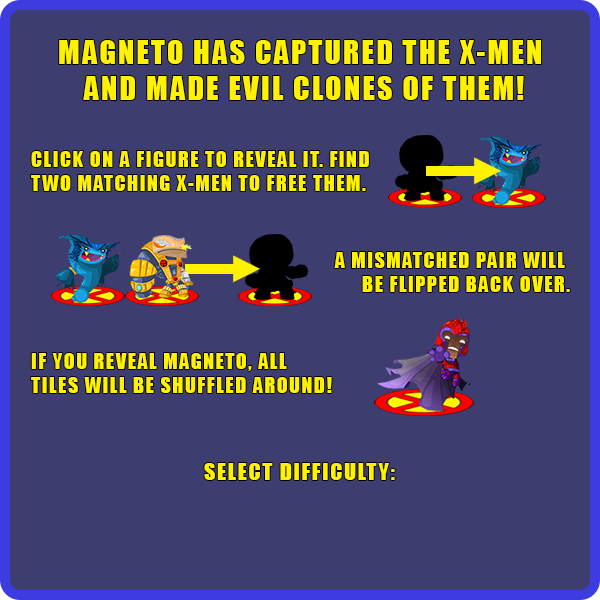
<style>
.page{position:relative;width:600px;height:600px;background:#3d3d6f}
.page>*{position:absolute;margin:0}
.t1{font:30px "Impact";letter-spacing:0.075em;color:#fff200}
.t2{font:20px "Impact";letter-spacing:0.075em;color:#fff200}
.t3{font:22px "Impact";letter-spacing:0.075em;color:#fff200}
</style>
<div class="page">
<p class="t1" style="left:59px;top:40px;width:482px;height:60px;text-align:center">MAGNETO HAS CAPTURED THE X-MEN <br>AND MADE EVIL CLONES OF THEM!</p>
<p class="t2" style="left:31px;top:151px;width:338px;height:40px">CLICK ON A FIGURE TO REVEAL IT. FIND <br>TWO MATCHING X-MEN TO FREE THEM.</p>
<p class="t2" style="left:334px;top:252px;width:236px;height:40px;text-align:right">A MISMATCHED PAIR WILL <br>BE FLIPPED BACK OVER.</p>
<p class="t2" style="left:31px;top:353px;width:301px;height:40px">IF YOU REVEAL MAGNETO, ALL <br>TILES WILL BE SHUFFLED AROUND!</p>
<p class="t3" style="left:204px;top:463px;width:191px;height:17px">SELECT DIFFICULTY:</p>
</div>
